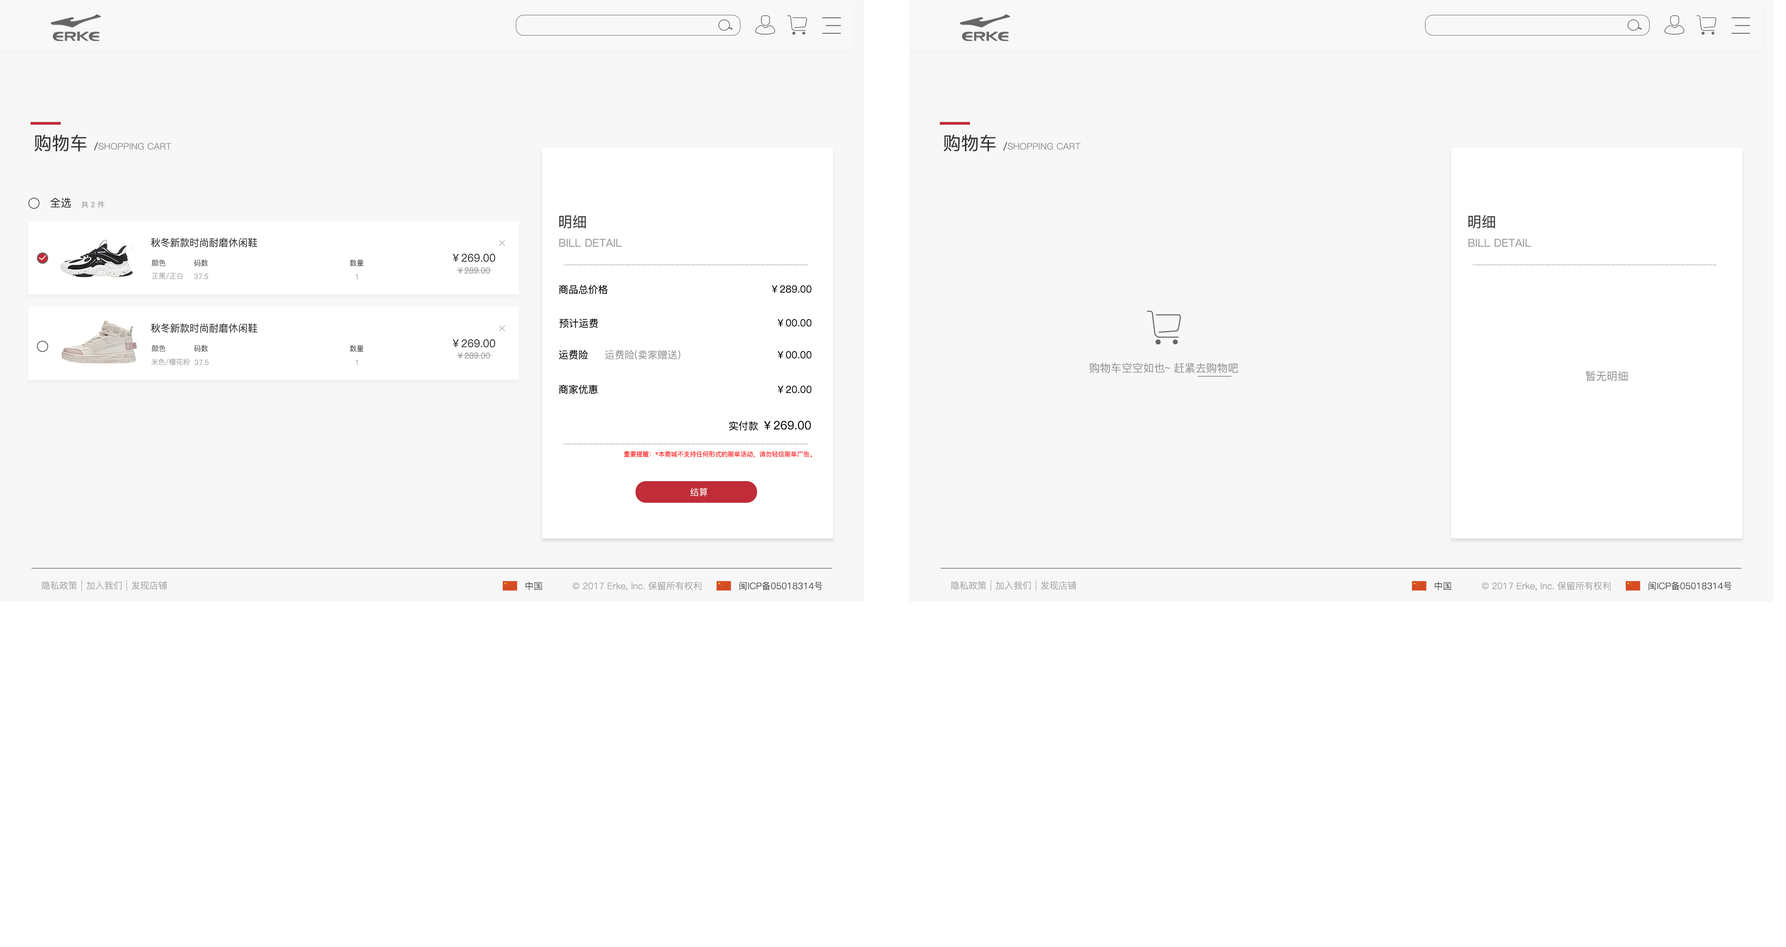
<style>
.page{position:relative;width:1786px;height:947px;background:#ffffff}
.page>*{position:absolute;margin:0}
.t1{font:9px "PingFang-SC-Medium";color:#999999}
.t2{font:18px "PingFang-SC-Medium";color:#333333}
.t3{font:9px "PingFang-SC-Medium";color:#333333}
.t4{font:10.8px "PingFang-SC-Medium";color:#333333}
.t5{font:7.2px "PingFang-SC-Medium";color:#999999}
.t6{font:14.4px "PingFang-SC-Medium";color:#333333}
.t7{font:9.9px "PingFang-SC-Medium";color:#323232}
.t8{font:10.8px "PingFang-SC-Medium";color:#999999}
.t9{font:7.2px "PingFang-SC-Regular";color:#323232}
.t10{font:8.1px "PingFang-SC-Medium";color:#999999}
.t11{font:7.2px "PingFang-SC-Regular";color:#999999}
.t12{font:9.9px "PingFang-SC-Medium";color:#010101}
.t13{font:9.9px "PingFang-SC-Medium";color:#999999}
.t14{font:11.7px "PingFang-SC-Medium";color:#010101}
.t15{font:6.3px "PingFang-SC-Medium";color:#ff0000}
.t16{font:9px "PingFang-SC-Regular";color:#ffffff}
.t17{font:9px "PingFang-SC-Regular";color:#999999}
.t18{font:9px "PingFang-SC-Regular";color:#333333}
</style>
<div class="page">
<p class="t1" style="left:34px;top:135px;width:137px;height:17px"><span class="t2">购物车 </span><span class="t3">/</span>SHOPPING CART</p>
<p class="t1" style="left:943px;top:135px;width:137px;height:17px"><span class="t2">购物车 </span><span class="t3">/</span>SHOPPING CART</p>
<p class="t4" style="left:50px;top:198px;width:21px;height:10px">全选</p>
<p class="t5" style="left:81px;top:201px;width:24px;height:7px">共 2 件</p>
<p class="t6" style="left:559px;top:215px;width:27px;height:14px">明细</p>
<p class="t6" style="left:1468px;top:215px;width:27px;height:14px">明细</p>
<p class="t7" style="left:151px;top:238px;width:106px;height:9px">秋冬新款时尚耐磨休闲鞋</p>
<p class="t8" style="left:559px;top:238px;width:63px;height:9px">BILL DETAIL</p>
<p class="t8" style="left:1468px;top:238px;width:63px;height:9px">BILL DETAIL</p>
<p class="t4" style="left:453px;top:253px;width:42px;height:9px">￥269.00</p>
<p class="t9" style="left:152px;top:259px;width:14px;height:7px">颜色</p>
<p class="t9" style="left:194px;top:259px;width:14px;height:7px">码数</p>
<p class="t9" style="left:350px;top:259px;width:14px;height:7px">数量</p>
<p class="t10" style="left:458px;top:267px;width:32px;height:7px">￥289.00</p>
<p class="t11" style="left:152px;top:272px;width:30px;height:7px">正黑/正白</p>
<p class="t11" style="left:194px;top:274px;width:14px;height:5px">37.5</p>
<p class="t11" style="left:355px;top:274px;width:3px;height:5px">1</p>
<p class="t12" style="left:559px;top:284px;width:48px;height:10px">商品总价格</p>
<p class="t12" style="left:771px;top:285px;width:40px;height:8px">￥289.00</p>
<p class="t7" style="left:151px;top:323px;width:106px;height:10px">秋冬新款时尚耐磨休闲鞋</p>
<p class="t12" style="left:559px;top:319px;width:39px;height:9px">预计运费</p>
<p class="t12" style="left:778px;top:319px;width:33px;height:8px">￥00.00</p>
<p class="t4" style="left:453px;top:339px;width:42px;height:8px">￥269.00</p>
<p class="t9" style="left:152px;top:345px;width:14px;height:7px">颜色</p>
<p class="t9" style="left:194px;top:345px;width:14px;height:7px">码数</p>
<p class="t9" style="left:350px;top:345px;width:14px;height:7px">数量</p>
<p class="t10" style="left:458px;top:352px;width:32px;height:7px">￥289.00</p>
<p class="t12" style="left:559px;top:350px;width:29px;height:10px">运费险</p>
<p class="t13" style="left:605px;top:350px;width:75px;height:10px">运费险(卖家赠送）</p>
<p class="t12" style="left:778px;top:351px;width:33px;height:8px">￥00.00</p>
<p class="t11" style="left:151px;top:358px;width:39px;height:7px">米色/樱花粉</p>
<p class="t11" style="left:194px;top:360px;width:15px;height:5px">37.5</p>
<p class="t11" style="left:355px;top:360px;width:3px;height:5px">1</p>
<p class="t8" style="left:1089px;top:363px;width:149px;height:10px">购物车空空如也~ 赶紧去购物吧</p>
<p class="t8" style="left:1585px;top:371px;width:42px;height:10px">暂无明细</p>
<p class="t12" style="left:559px;top:384px;width:39px;height:10px">商家优惠</p>
<p class="t12" style="left:778px;top:386px;width:33px;height:7px">￥20.00</p>
<p class="t14" style="left:729px;top:421px;width:82px;height:10px"><span class="t12">实付款 </span>￥269.00</p>
<p class="t15" style="left:624px;top:451px;width:188px;height:7px">重要提醒：*本商城不支持任何形式的刷单活动，请勿轻信刷单广告。</p>
<p class="t16" style="left:690px;top:488px;width:17px;height:8px">结算</p>
<p class="t17" style="left:42px;top:581px;width:35px;height:8px">隐私政策</p>
<p class="t17" style="left:86px;top:581px;width:35px;height:8px">加入我们</p>
<p class="t17" style="left:131px;top:581px;width:36px;height:8px">发现店铺</p>
<p class="t18" style="left:525px;top:581px;width:17px;height:9px">中国</p>
<p class="t17" style="left:572px;top:581px;width:129px;height:9px">© 2017 Erke, Inc. 保留所有权利</p>
<p class="t18" style="left:739px;top:581px;width:84px;height:9px">闽ICP备05018314号</p>
<p class="t17" style="left:951px;top:581px;width:35px;height:8px">隐私政策</p>
<p class="t17" style="left:995px;top:581px;width:35px;height:8px">加入我们</p>
<p class="t17" style="left:1040px;top:581px;width:36px;height:8px">发现店铺</p>
<p class="t18" style="left:1434px;top:581px;width:17px;height:9px">中国</p>
<p class="t17" style="left:1481px;top:581px;width:129px;height:9px">© 2017 Erke, Inc. 保留所有权利</p>
<p class="t18" style="left:1648px;top:581px;width:84px;height:9px">闽ICP备05018314号</p>
</div>
